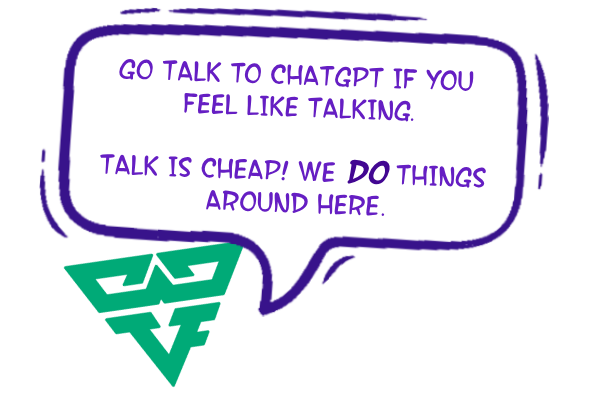
<style>
.page{position:relative;width:600px;height:400px;background:#ffffff}
.page>*{position:absolute;margin:0}
.t1{font:30px/32px "SFWonderComic";color:#651ec3}
.t2{font:34px/32px "SFWonderComic-BoldItalic";color:#420792}
</style>
<div class="page">
<p class="t1" style="left:100px;top:58px;width:386px;height:158px;text-align:center;rotate:2deg">Go tALK TO CHATGPT IF YOU <br>FEEL LIKE TALKING.<br><br>tALK IS CHEAP! wE <span class="t2">DO </span>THINGS <br>AROUND HERE.</p>
</div>
